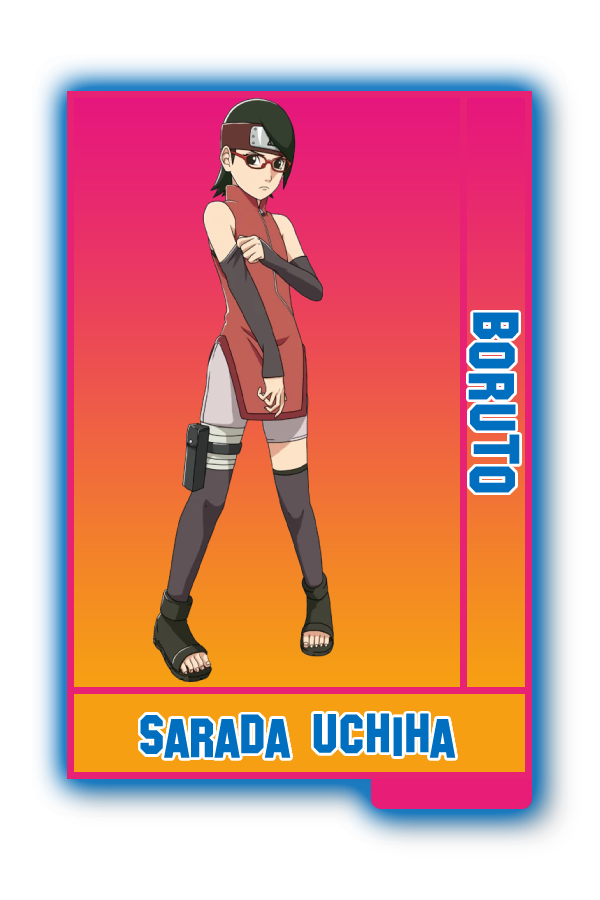
<style>
.page{position:relative;width:600px;height:900px;background:#ffffff}
.page>*{position:absolute;margin:0}
.t1{font:64.7px "SFHollywoodHills";color:#016fbf}
.t2{font:55.4px "SFHollywoodHills";color:#016fbf}
</style>
<div class="page">
<p class="t1" style="left:468px;top:312px;width:52px;height:181px;rotate:90deg">Boruto</p>
<p class="t2" style="left:140px;top:713px;width:316px;height:45px">Sarada Uchiha</p>
</div>
